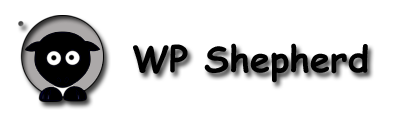
<style>
.page{position:relative;width:410px;height:120px;background:#ffffff}
.page>*{position:absolute;margin:0}
.t1{font:36px "ComicSansMS-Bold";color:#000000}
</style>
<div class="page">
<p class="t1" style="left:133px;top:43px;width:235px;height:40px">WP Shepherd</p>
</div>
